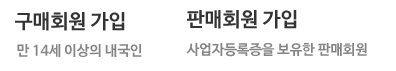
<style>
.page{position:relative;width:396px;height:71px;background:#ffffff}
.page>*{position:absolute;margin:0}
.t1{font:20px "NanumBarunGothicBold";color:#333333}
.t2{font:14px "NanumBarunGothicBold";color:#848484}
</style>
<div class="page">
<p class="t1" style="left:15px;top:12px;width:110px;height:19px">구매회원 가입</p>
<p class="t1" style="left:187px;top:10px;width:110px;height:19px">판매회원 가입</p>
<p class="t2" style="left:17px;top:44px;width:125px;height:13px">만 14세 이상의 내국인</p>
<p class="t2" style="left:186px;top:43px;width:181px;height:14px">사업자등록증을 보유한 판매회원</p>
</div>
